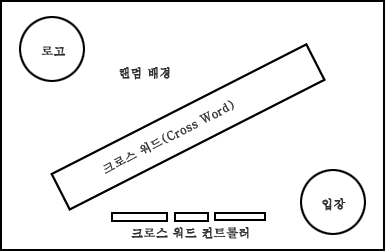
<style>
.page{position:relative;width:385px;height:251px;background:#ffffff}
.page>*{position:absolute;margin:0}
.t1{font:12px "Haansoft-Batang";color:#313131;font-weight:bold}
</style>
<div class="page">
<p class="t1" style="left:41px;top:46px;width:25px;height:10px">로고</p>
<p class="t1" style="left:119px;top:67px;width:51px;height:13px">랜덤 배경</p>
<p class="t1" style="left:103px;top:100px;width:131px;height:74px;rotate:-27deg">크로스 워드(Cross Word)</p>
<p class="t1" style="left:322px;top:198px;width:24px;height:13px">입장</p>
<p class="t1" style="left:131px;top:227px;width:118px;height:12px">크로스 워드 컨트롤러</p>
</div>
